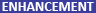
<style>
.page{position:relative;width:96px;height:13px;background:#3b3d9c}
.page>*{position:absolute;margin:0}
.t1{font:14px "Calibri-Bold";color:#ffffff}
</style>
<div class="page">
<p class="t1" style="left:2px;top:2px;width:92px;height:9px">ENHANCEMENT</p>
</div>
